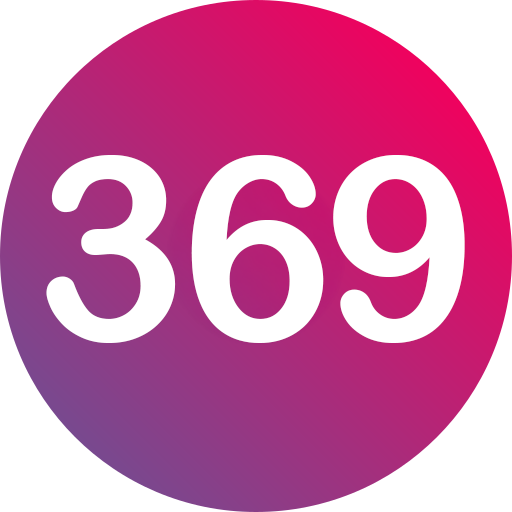
<style>
.page{position:relative;width:512px;height:512px;background:#ffffff}
.page>*{position:absolute;margin:0}
.t1{font:257.2px "ArialRoundedMTBold";letter-spacing:-0.03em;color:#ffffff}
</style>
<div class="page">
<p class="t1" style="left:46px;top:155px;width:419px;height:188px">369</p>
</div>
